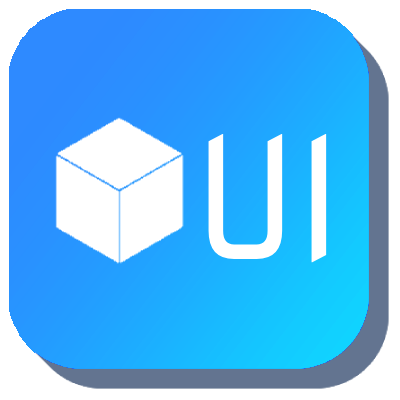
<style>
.page{position:relative;width:400px;height:400px;background:#ffffff}
.page>*{position:absolute;margin:0}
.t1{font:165.1px "NovaSquare";color:#ffffff;scale:0.9 1}
</style>
<div class="page">
<p class="t1" style="left:208px;top:134px;width:119px;height:129px">UI</p>
</div>
